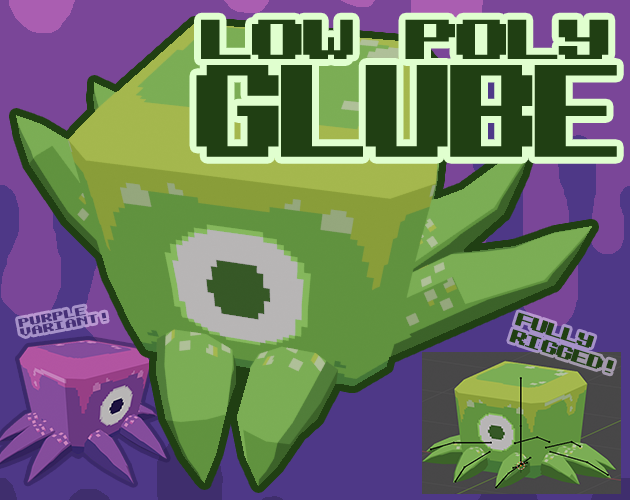
<style>
.page{position:relative;width:630px;height:500px}
.page>*{position:absolute;margin:0}
.t1{font:52.4px "ChevyRay---Thicket-Mono";letter-spacing:-0.06em;color:#203f13;text-transform:uppercase;scale:1.41 1}
.t2{font:121.8px "ChevyRay---Thicket-Mono";letter-spacing:-0.06em;color:#203f13;text-transform:uppercase}
.t3{font:10.9px/9.8px "ChevyRay---Thicket-Mono";color:#463077;text-transform:uppercase;scale:1.41 1}
.t4{font:17px/17.7px "ChevyRay---Thicket-Mono";letter-spacing:-0.06em;color:#203f13;text-transform:uppercase;scale:1.36 1}
</style>
<div class="page">
<p class="t1" style="left:201px;top:19px;width:408px;height:40px">low poly</p>
<p class="t2" style="left:196px;top:65px;width:421px;height:92px">Glube</p>
<p class="t3" style="left:18px;top:306px;width:89px;height:30px;rotate:-11deg">purple<br>variant!</p>
<p class="t4" style="left:509px;top:312px;width:105px;height:62px;rotate:18deg">fully<br>rigged!</p>
</div>
